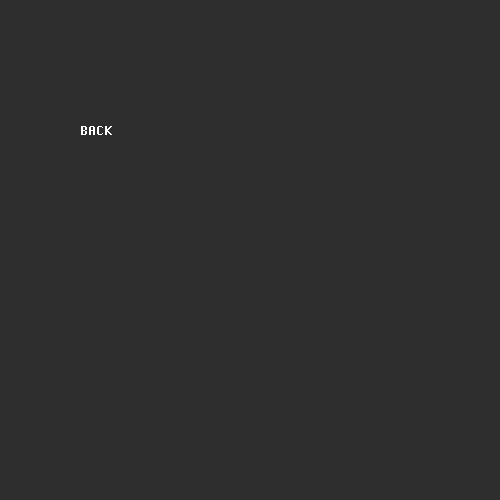
<style>
.page{position:relative;width:500px;height:500px;background:#2e2e2e}
.page>*{position:absolute;margin:0}
.t1{font:12px "Silom";color:#ffffff}
</style>
<div class="page">
<p class="t1" style="left:81px;top:126px;width:31px;height:9px">BACK</p>
</div>
